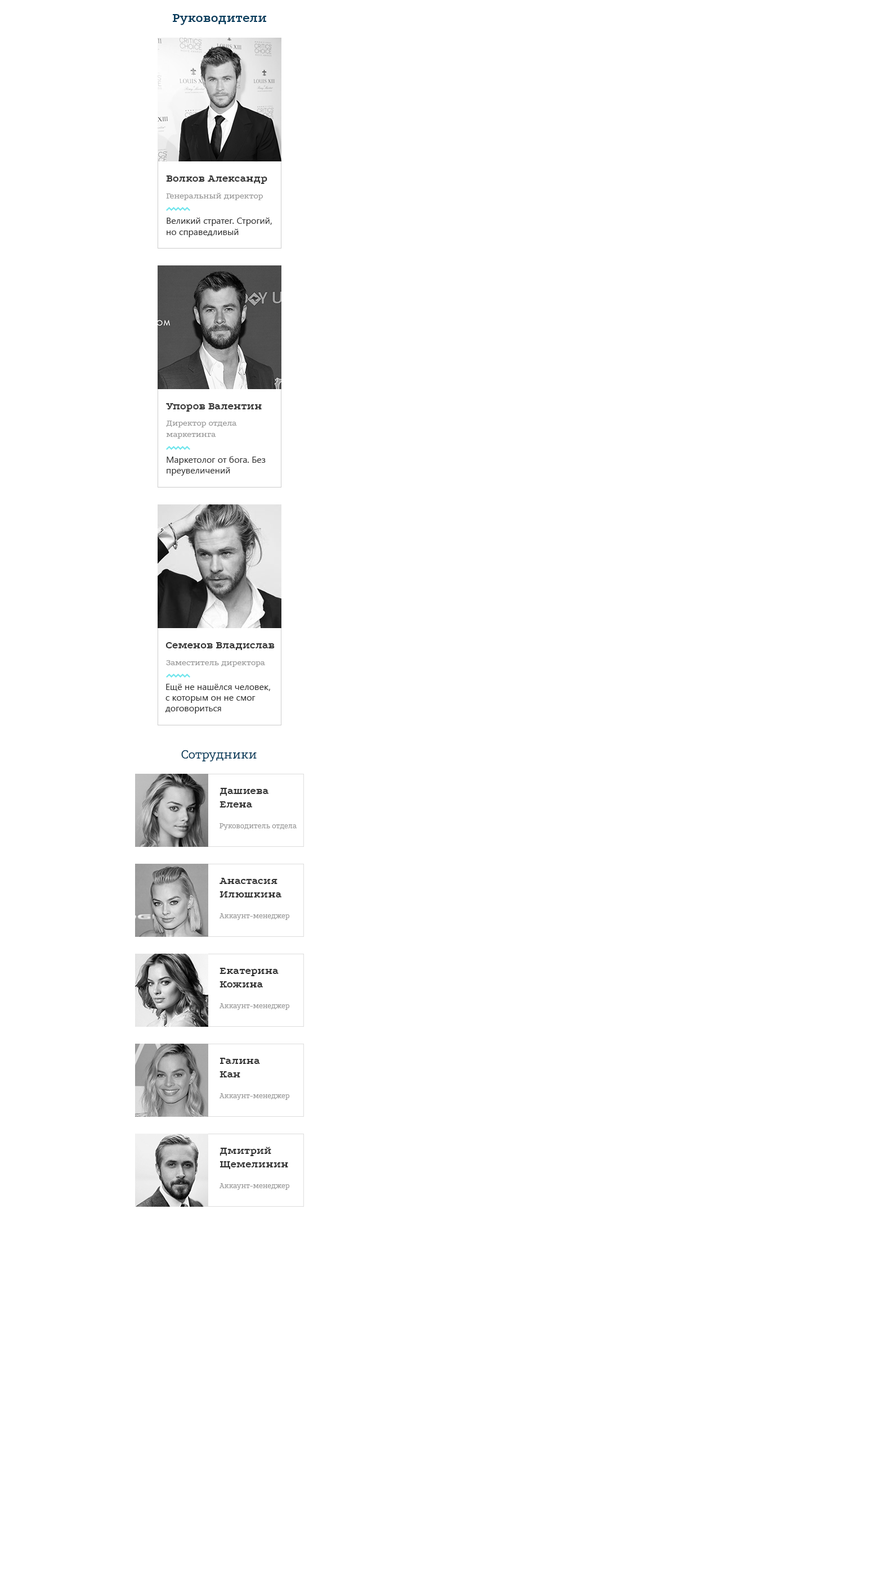
<style>
.page{position:relative;width:878px;height:1588px;background:#ffffff}
.page>*{position:absolute;margin:0}
.t1{font:13.5px "Podkova-Bold";color:#053c5c}
.t2{font:11.2px "Podkova-Bold";color:#333333}
.t3{font:9px "Podkova-Regular";color:#999999}
.t4{font:9px "SegoeUI";color:#333333}
.t5{font:13.5px "Podkova-Regular";color:#053c5c}
.t6{font:7.9px "Podkova-Regular";color:#999999}
</style>
<div class="page">
<p class="t1" style="left:173px;top:14px;width:93px;height:11px">Руководители</p>
<p class="t2" style="left:166px;top:176px;width:101px;height:8px">Волков Александр</p>
<p class="t3" style="left:166px;top:193px;width:97px;height:7px">Генеральный директор</p>
<p class="t4" style="left:166px;top:218px;width:106px;height:19px">Великий стратег. Строгий, но справедливый</p>
<p class="t2" style="left:166px;top:403px;width:96px;height:9px">Упоров Валентин</p>
<p class="t3" style="left:166px;top:421px;width:71px;height:18px">Директор отдела маркетинга</p>
<p class="t4" style="left:166px;top:456px;width:100px;height:20px">Маркетолог от бога. Без преувеличений</p>
<p class="t2" style="left:165px;top:642px;width:109px;height:8px">Семенов Владислав</p>
<p class="t3" style="left:166px;top:660px;width:99px;height:7px">Заместитель директора</p>
<p class="t4" style="left:165px;top:684px;width:105px;height:30px">Ещё не нашёлся человек, с которым он не смог договориться</p>
<p class="t5" style="left:181px;top:750px;width:75px;height:12px">Сотрудники</p>
<p class="t2" style="left:219px;top:788px;width:50px;height:20px">Дашиева<br>Елена</p>
<p class="t6" style="left:219px;top:824px;width:78px;height:6px">Руководитель отдела</p>
<p class="t2" style="left:219px;top:878px;width:63px;height:20px">Анастасия Илюшкина</p>
<p class="t6" style="left:219px;top:914px;width:71px;height:6px">Аккаунт-менеджер</p>
<p class="t2" style="left:219px;top:968px;width:59px;height:20px">Екатерина Кожина</p>
<p class="t6" style="left:219px;top:1004px;width:71px;height:6px">Аккаунт-менеджер</p>
<p class="t2" style="left:219px;top:1058px;width:41px;height:20px">Галина Кан</p>
<p class="t6" style="left:219px;top:1094px;width:71px;height:6px">Аккаунт-менеджер</p>
<p class="t2" style="left:219px;top:1147px;width:69px;height:22px">Дмитрий Щемелинин</p>
<p class="t6" style="left:219px;top:1184px;width:71px;height:6px">Аккаунт-менеджер</p>
</div>
